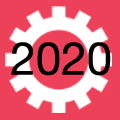
<style>
.page{position:relative;width:120px;height:120px;background:#ed4159}
.page>*{position:absolute;margin:0}
.t1{font:45.7px "HelveticaNeue";color:#000000}
</style>
<div class="page">
<p class="t1" style="left:11px;top:42px;width:100px;height:34px">2020</p>
</div>
